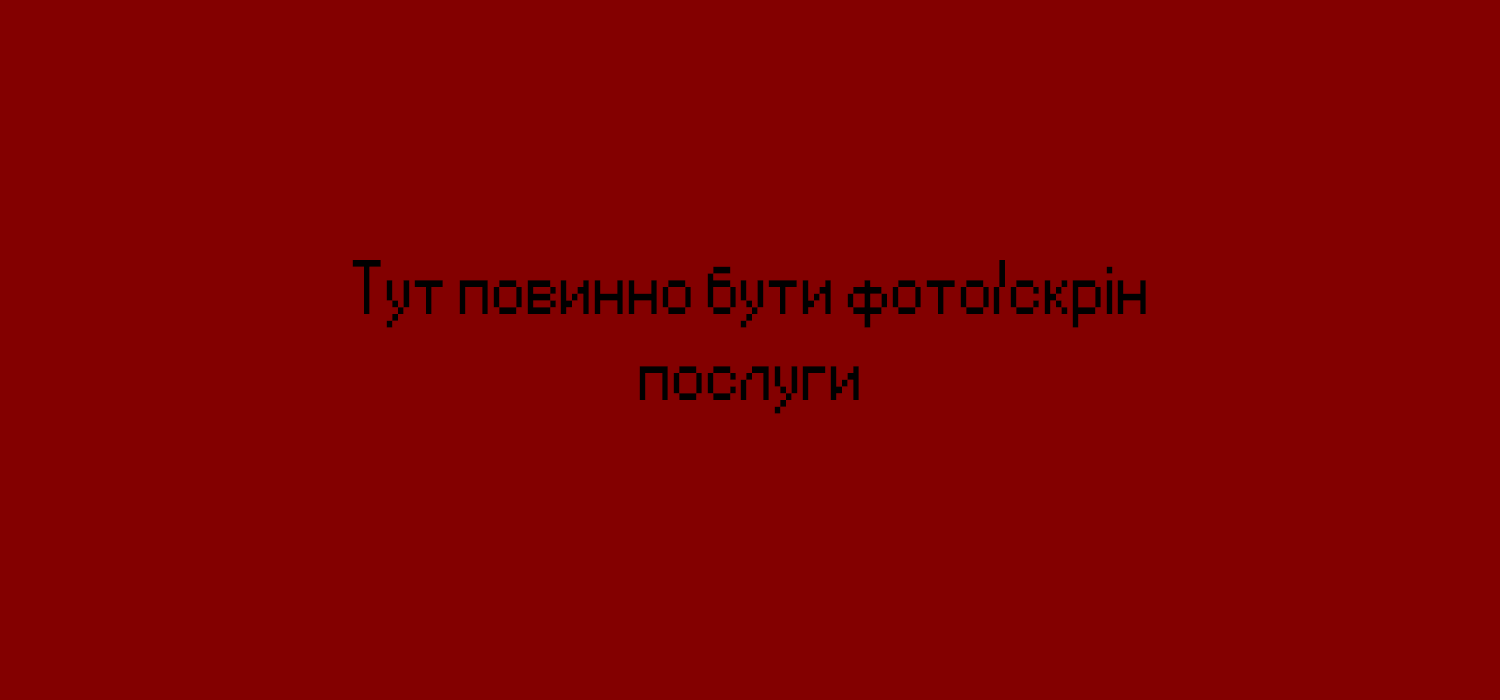
<style>
.page{position:relative;width:1500px;height:700px;background:#830000}
.page>*{position:absolute;margin:0}
.t1{font:72px "Small Fonts";color:#000000}
</style>
<div class="page">
<p class="t1" style="left:352px;top:260px;width:794px;height:154px;text-align:center">Тут повинно бути фото/скрін<br>послуги</p>
</div>
